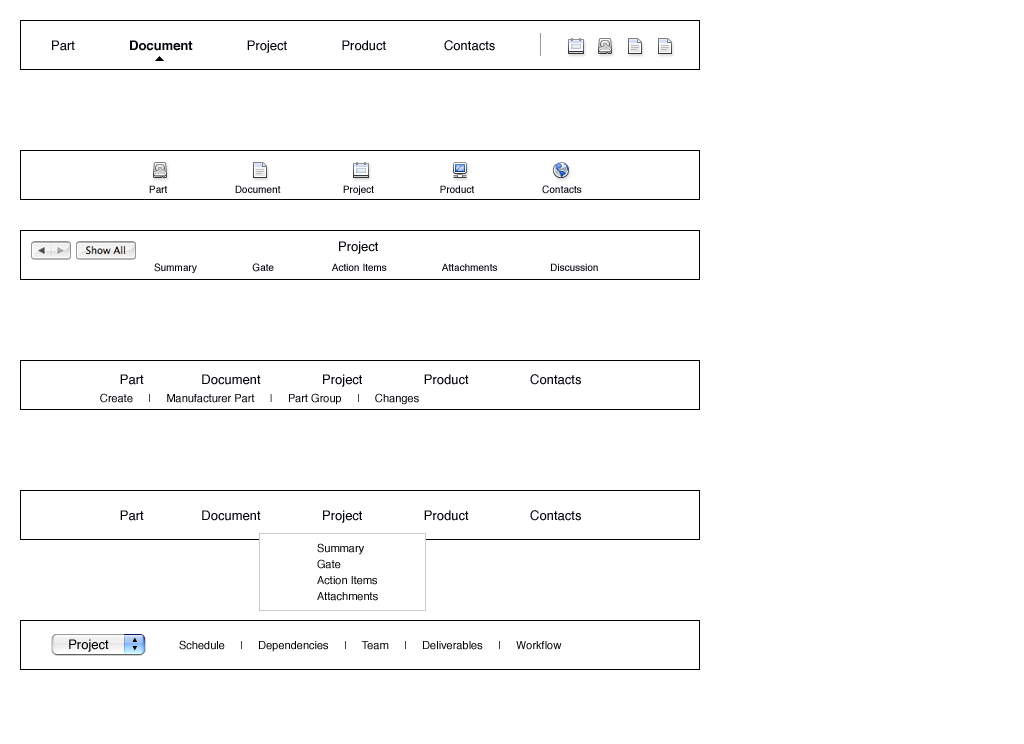
<style>
.page{position:relative;width:1024px;height:744px;background:#ffffff}
.page>*{position:absolute;margin:0}
.t1{font:13px "Helvetica";color:#000008}
.t2{font:13px "Helvetica-Bold";color:#000008}
.t3{font:10px "Helvetica";color:#000008}
.t4{font:11px "Helvetica";color:#000008}
.t5{font:11px/16px "Helvetica";color:#000000}
.t6{font:11px "Helvetica";color:#000000}
</style>
<div class="page">
<p class="t1" style="left:52px;top:40px;width:443px;height:13px">Part               <span class="t2">Document</span>               Project               Product                Contacts</p>
<p class="t3" style="left:149px;top:185px;width:433px;height:10px">Part       Document       Project   Product             Contacts</p>
<p class="t1" style="left:339px;top:241px;width:39px;height:13px">Project</p>
<p class="t3" style="left:154px;top:263px;width:444px;height:10px">Summary                    Gate                     Action Items                    Attachments                   Discussion</p>
<p class="t1" style="left:120px;top:374px;width:461px;height:13px">Part                Document                 Project                 Product                 Contacts</p>
<p class="t4" style="left:100px;top:393px;width:319px;height:12px">Create     |     Manufacturer Part     |     Part Group     |     Changes</p>
<p class="t1" style="left:120px;top:510px;width:461px;height:13px">Part                Document                 Project                 Product                 Contacts</p>
<p class="t5" style="left:317px;top:543px;width:61px;height:58px">Summary<br>Gate<br>Action Items<br>Attachments</p>
<p class="t6" style="left:179px;top:640px;width:383px;height:12px">Schedule     |     Dependencies     |     Team     |     Deliverables     |     Workflow</p>
</div>
